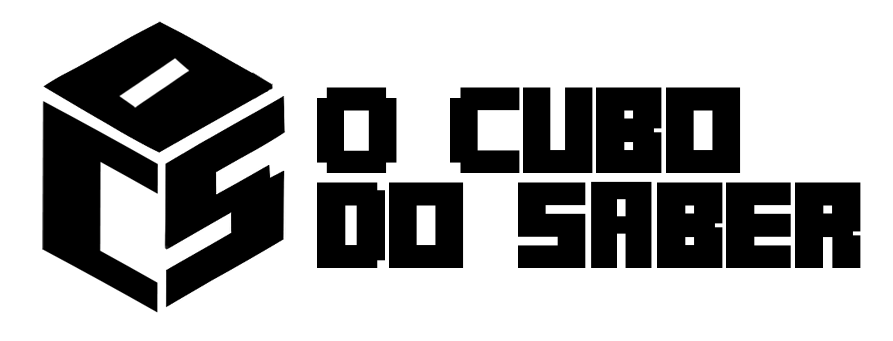
<style>
.page{position:relative;width:893px;height:341px;background:#ffffff}
.page>*{position:absolute;margin:0}
.t1{font:109.2px/94.9px "Minecrafter";letter-spacing:-0.04em;color:#000000}
.t2{font:123.1px/94.9px "MinecraftTen";letter-spacing:-0.04em;color:#000000}
</style>
<div class="page">
<p class="t1" style="left:317px;top:87px;width:544px;height:181px">O Cubo<br>do s<span class="t2">a</span>ber</p>
</div>
